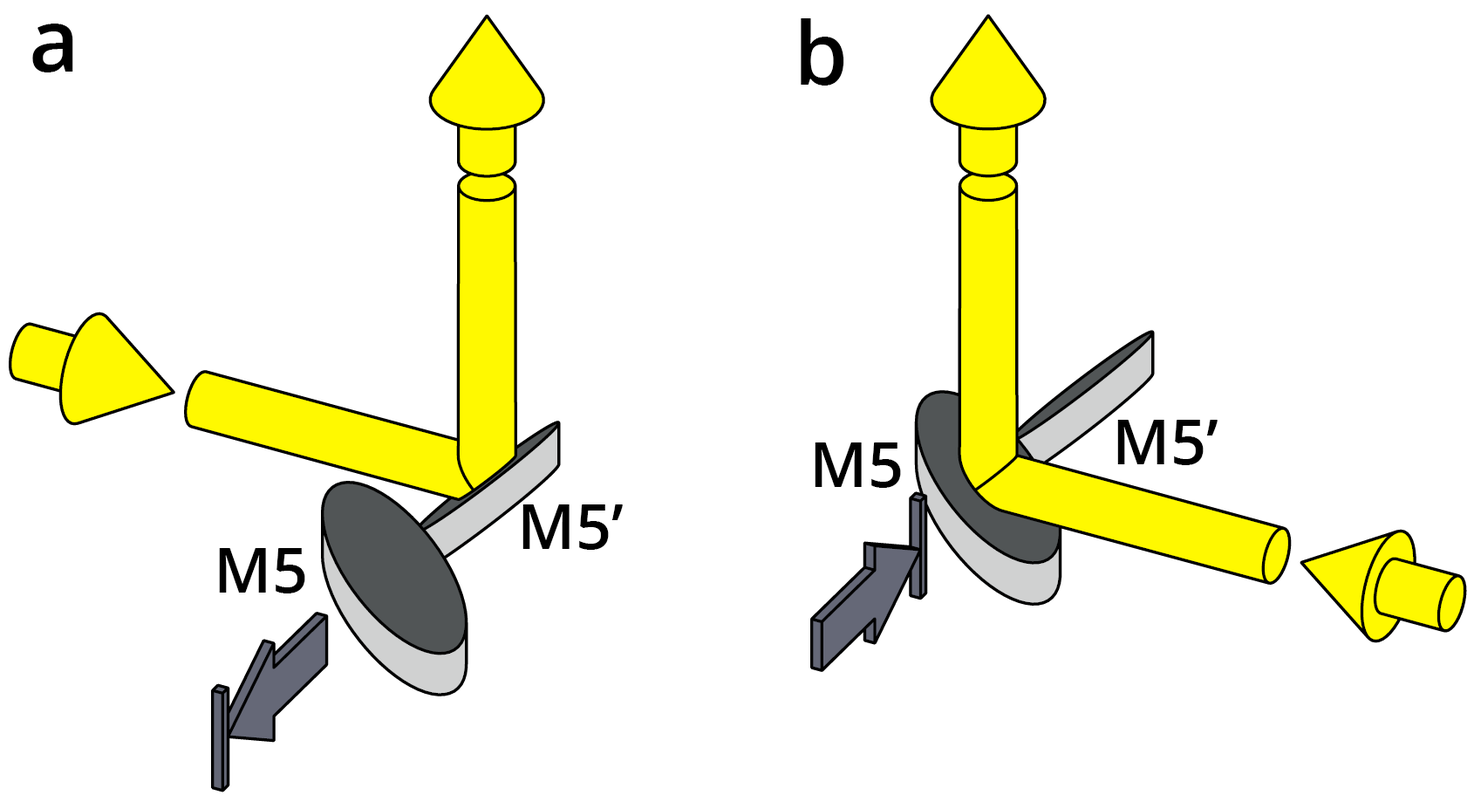
<style>
.page{position:relative;width:1474px;height:809px;background:#ffffff}
.page>*{position:absolute;margin:0}
.t1{font:87.2px "OpenSans-Semibold";color:#000000}
.t2{font:62.8px "OpenSans-Semibold";color:#000000}
</style>
<div class="page">
<p class="t1" style="left:32px;top:24px;width:41px;height:48px">a</p>
<p class="t1" style="left:801px;top:18px;width:44px;height:67px">b</p>
<p class="t2" style="left:1118px;top:420px;width:100px;height:45px">M5’</p>
<p class="t2" style="left:815px;top:442px;width:86px;height:46px">M5</p>
<p class="t2" style="left:523px;top:504px;width:100px;height:46px">M5’</p>
<p class="t2" style="left:219px;top:548px;width:86px;height:45px">M5</p>
</div>
